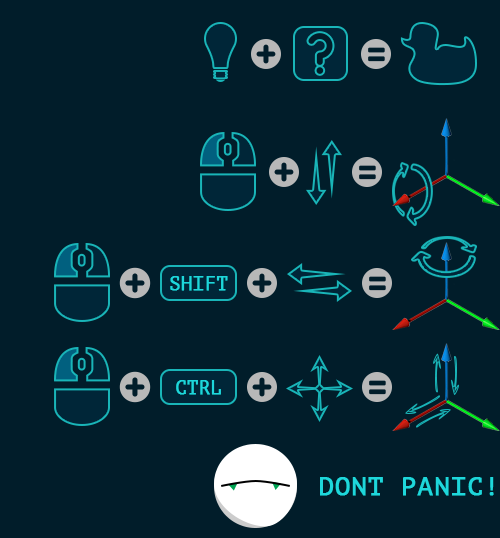
<style>
.page{position:relative;width:500px;height:538px;background:#011d2a}
.page>*{position:absolute;margin:0}
.t1{font:18.8px "PTMono-Regular";color:#1ed7db;text-transform:uppercase;font-weight:bold}
.t2{font:26.4px "PTMono-Regular";color:#1ed7db;text-transform:uppercase;font-weight:bold}
</style>
<div class="page">
<p class="t1" style="left:170px;top:276px;width:58px;height:15px">Shift</p>
<p class="t1" style="left:176px;top:380px;width:45px;height:15px">CTRL</p>
<p class="t2" style="left:320px;top:477px;width:174px;height:19px">Dont panic!</p>
</div>
